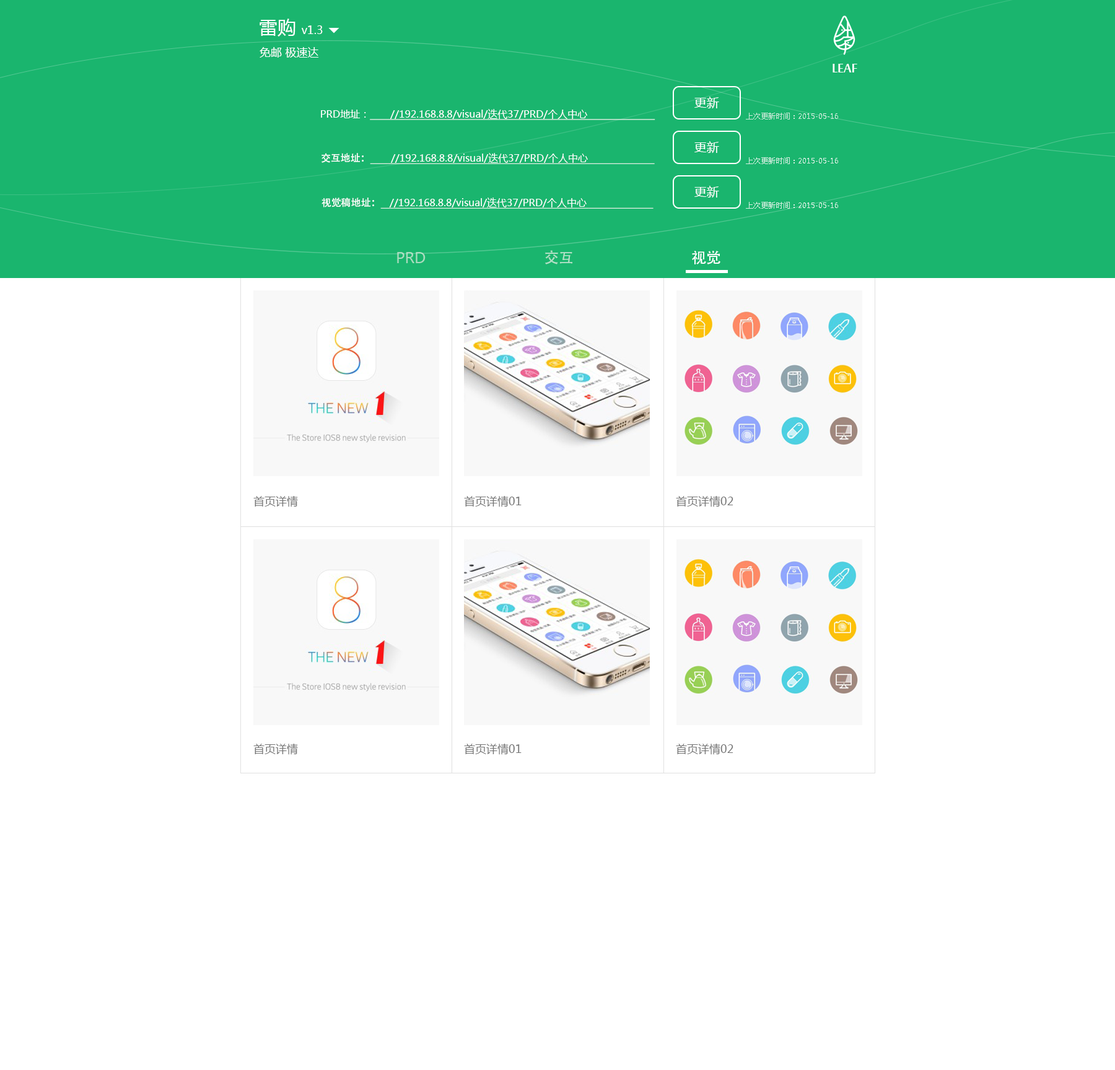
<style>
.page{position:relative;width:1115px;height:1070px;background:#ffffff}
.page>*{position:absolute;margin:0}
.t1{font:11.1px "MicrosoftYaHei";color:#ffffff}
.t2{font:18.6px "MicrosoftYaHei";color:#ffffff}
.t3{font:18.6px "MoolBoran";color:#ffffff}
.t4{font:12.4px "MicrosoftYaHei";color:#ffffff}
.t5{font:9.9px "MicrosoftYaHei";color:#ffffff;text-decoration:underline}
.t6{font:9.9px "MicrosoftYaHei";color:#ffffff}
.t7{font:7.4px "MicrosoftYaHei";color:#ceeada}
.t8{font:9.9px "AdobeHeitiStd-Regular";color:#ffffff}
.t9{font:7.4px "MicrosoftYaHei";color:#d9efe3}
.t10{font:14.9px "MicrosoftYaHei";color:#a8dcbf}
.t11{font:14.9px "AdobeHeitiStd-Regular";color:#b1e0c6}
.t12{font:14.9px "AdobeHeitiStd-Regular";color:#ffffff}
.t13{font:11.1px "MicrosoftYaHei";color:#757575}
</style>
<div class="page">
<p class="t1" style="left:259px;top:19px;width:64px;height:18px"><span class="t2">雷购 </span>v1.3</p>
<p class="t1" style="left:259px;top:47px;width:60px;height:11px">免邮 极速达</p>
<p class="t3" style="left:832px;top:64px;width:25px;height:8px">LEAF</p>
<p class="t4" style="left:694px;top:97px;width:25px;height:11px">更新</p>
<p class="t5" style="left:321px;top:109px;width:334px;height:11px"><span class="t6">PRD地址：</span>       //192.168.8.8/visual/迭代37/PRD/个人中心</p>
<p class="t7" style="left:745px;top:113px;width:93px;height:6px">上次更新时间：2015-05-16</p>
<p class="t4" style="left:694px;top:141px;width:25px;height:12px">更新</p>
<p class="t5" style="left:321px;top:153px;width:333px;height:11px"><span class="t8">交互地址：        </span> //192.168.8.8/visual/迭代37/PRD/个人中心</p>
<p class="t9" style="left:745px;top:157px;width:93px;height:7px">上次更新时间：2015-05-16</p>
<p class="t4" style="left:694px;top:186px;width:25px;height:12px">更新</p>
<p class="t5" style="left:321px;top:198px;width:332px;height:11px"><span class="t8">视觉稿地址：    </span>//192.168.8.8/visual/迭代37/PRD/个人中心</p>
<p class="t9" style="left:745px;top:202px;width:93px;height:7px">上次更新时间：2015-05-16</p>
<p class="t10" style="left:397px;top:252px;width:28px;height:11px">PRD</p>
<p class="t11" style="left:545px;top:250px;width:27px;height:14px">交互</p>
<p class="t12" style="left:692px;top:251px;width:28px;height:13px">视觉</p>
<p class="t13" style="left:253px;top:495px;width:45px;height:12px">首页详情</p>
<p class="t13" style="left:464px;top:495px;width:57px;height:12px">首页详情01</p>
<p class="t13" style="left:676px;top:495px;width:57px;height:12px">首页详情02</p>
<p class="t13" style="left:253px;top:743px;width:45px;height:12px">首页详情</p>
<p class="t13" style="left:464px;top:743px;width:57px;height:12px">首页详情01</p>
<p class="t13" style="left:676px;top:743px;width:57px;height:12px">首页详情02</p>
</div>
